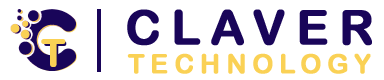
<style>
.page{position:relative;width:384px;height:80px;background:#ffffff}
.page>*{position:absolute;margin:0}
.t1{font:47.6px "ArialRoundedMTBold";letter-spacing:0.2em;color:#190559;font-weight:bold}
.t2{font:37.8px "ArialRoundedMTBold";color:#fad155;font-weight:bold}
.t3{font:34.7px "ArialRoundedMTBold";font-weight:bold}
.t4{font:26.6px "ArialRoundedMTBold";letter-spacing:0.2em;color:#fad155;font-weight:bold}
</style>
<div class="page">
<p class="t1" style="left:127px;top:9px;width:245px;height:37px">CLAVER</p>
<p class="t2" style="left:41px;top:39px;width:25px;height:28px">T</p>
<p class="t3" style="left:44px;top:41px;width:23px;height:26px">T</p>
<p class="t4" style="left:127px;top:53px;width:244px;height:21px">TECHNOLOGY</p>
</div>
